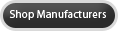
<style>
.page{position:relative;width:118px;height:31px}
.page>*{position:absolute;margin:0}
.t1{font:11px "Myriad-Roman";letter-spacing:0.02em;color:#ffffff}
</style>
<div class="page">
<p class="t1" style="left:9px;top:10px;width:97px;height:10px">Shop Manufacturers</p>
</div>
